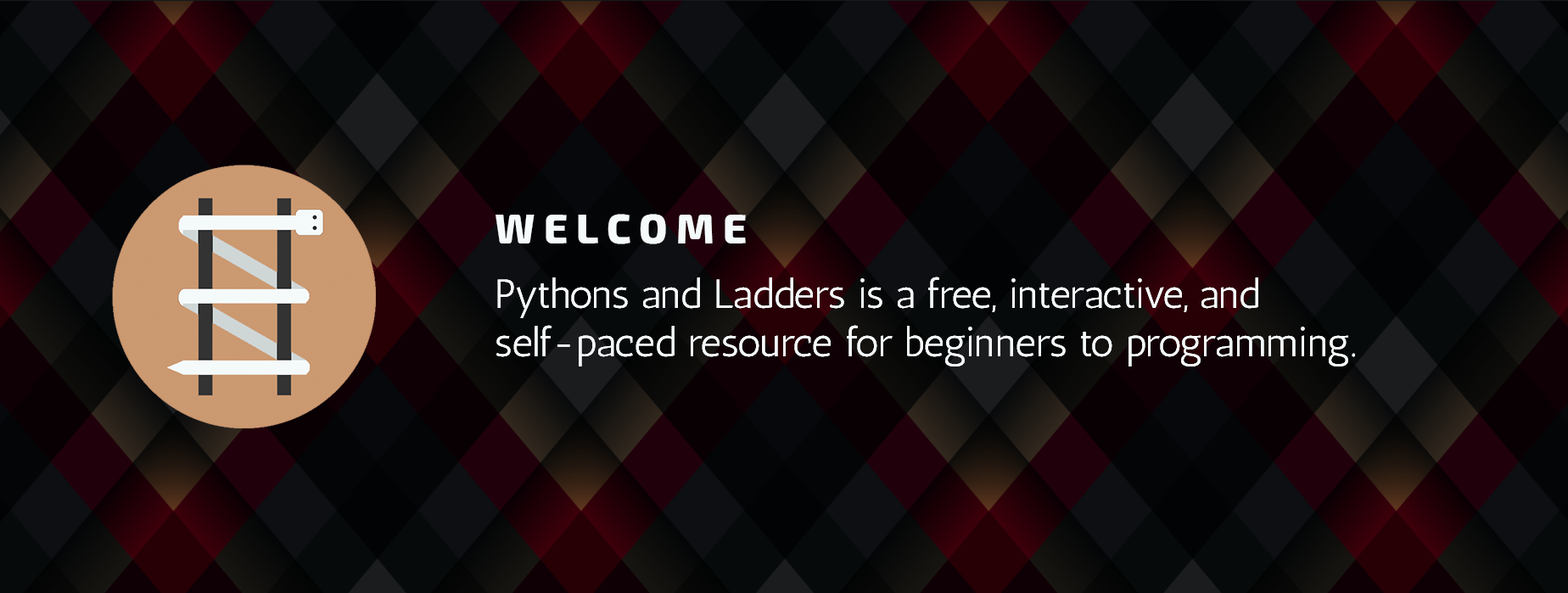
<style>
.page{position:relative;width:1568px;height:593px}
.page>*{position:absolute;margin:0}
.t1{font:40.7px "Antic-Regular";color:#f5fafa}
.t2{font:40.7px "Exo2-ExtraBold";color:#f5fafa}
</style>
<div class="page">
<p class="t1" style="left:496px;top:214px;width:859px;height:153px"><span class="t2">W E L C O M E<br><br></span>Pythons and Ladders is a free, interactive, and self-paced resource for beginners to programming.</p>
</div>
